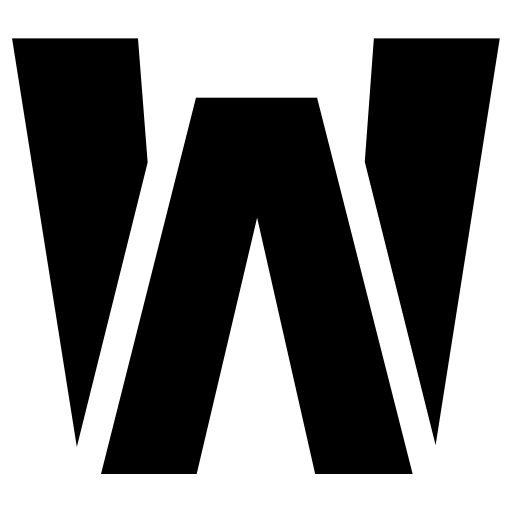
<style>
.page{position:relative;width:512px;height:512px;background:#ffffff}
.page>*{position:absolute;margin:0}
.t1{font:605.2px "ProtestGuerrilla-Regular";color:#000000}
</style>
<div class="page">
<p class="t1" style="left:12px;top:38px;width:488px;height:436px">W</p>
</div>
